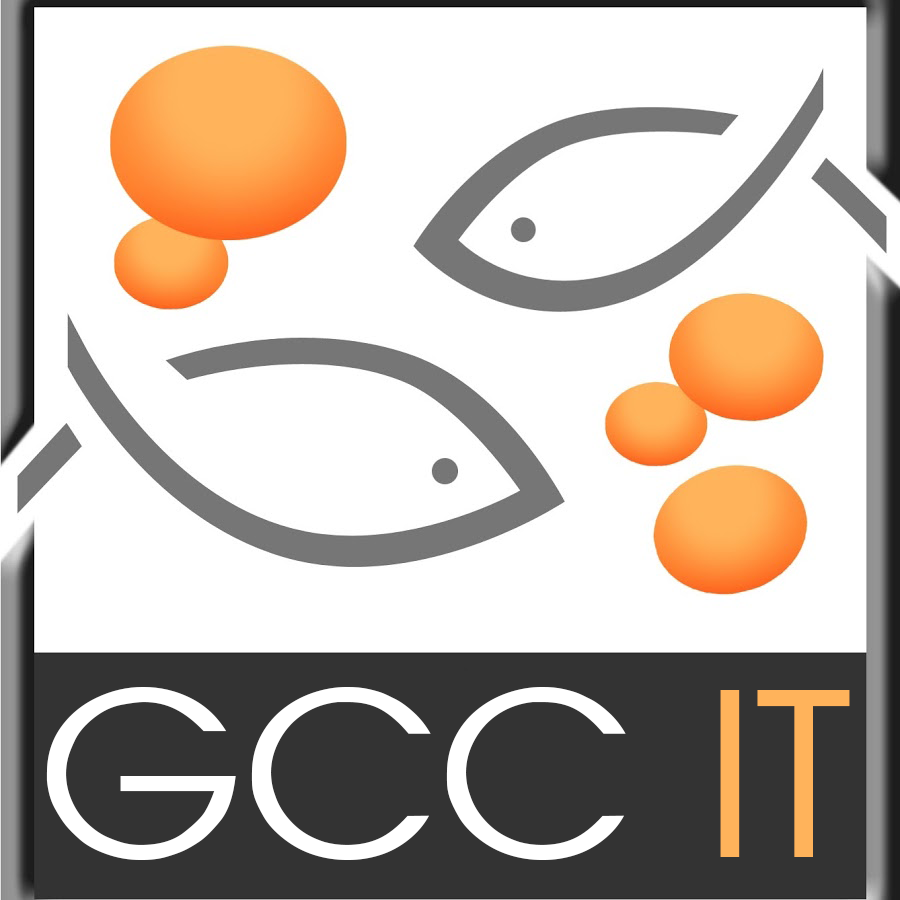
<style>
.page{position:relative;width:900px;height:900px;background:#ffffff}
.page>*{position:absolute;margin:0}
.t1{font:234.1px "AvantGuardRegularSWFTE";color:#ffffff;scale:1.11 1}
.t2{font:234.1px "AvantGuardRegularSWFTE";color:#ffb35b;scale:1.11 1}
</style>
<div class="page">
<p class="t1" style="left:46px;top:687px;width:804px;height:173px">GCC <span class="t2">IT</span></p>
</div>
